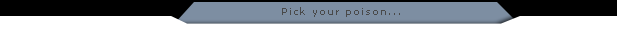
<style>
.page{position:relative;width:617px;height:29px;background:#ffffff}
.page>*{position:absolute;margin:0}
.t1{font:10px "Verdana";letter-spacing:0.1em;color:#494949}
</style>
<div class="page">
<p class="t1" style="left:282px;top:7px;width:118px;height:10px">Pick your poison...</p>
</div>
